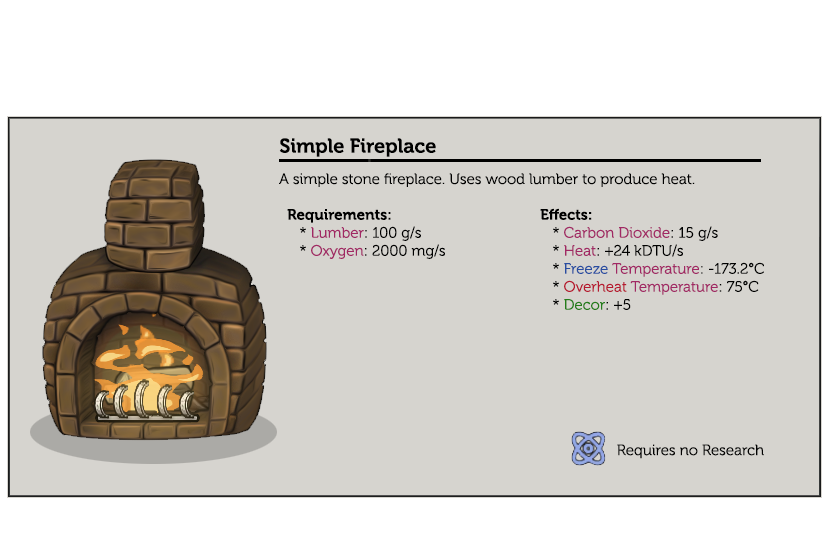
<style>
.page{position:relative;width:830px;height:550px;background:#d6d4cf}
.page>*{position:absolute;margin:0}
.t1{font:20px "Museo-700";color:#000000}
.t2{font:15px "Museo-300";color:#000000}
.t3{font:15px "Museo-700";color:#000000}
.t4{font:15px "Museo-300";color:#a12864}
.t5{font:15px "Museo-300";color:#284da1}
.t6{font:15px "Museo-300";color:#b6182f}
.t7{font:15px "Museo-300";color:#247d1a}
.t8{font:15px "Museo-300";color:#020202}
</style>
<div class="page">
<p class="t1" style="left:279px;top:138px;width:157px;height:19px">Simple Fireplace</p>
<p class="t2" style="left:279px;top:173px;width:416px;height:14px">A simple stone fireplace. Uses wood lumber to produce heat.</p>
<p class="t2" style="left:287px;top:209px;width:158px;height:50px"><span class="t3">Requirements:</span><br>   * <span class="t4">Lumber</span>: 100 g/s                    <br>   * <span class="t4">Oxygen</span>: 2000 mg/s</p>
<p class="t2" style="left:540px;top:208px;width:224px;height:102px"><span class="t3">Effects:</span><br>   * <span class="t4">Carbon Dioxide</span>: 15 g/s                    <br>   * <span class="t4">Heat</span>: +24 kDTU/s<br>   * <span class="t5">Freeze</span><span class="t4"> Temperature</span>: -173.2°C <br>   * <span class="t6">Overheat</span><span class="t4"> Temperature</span>: 75°C<br>   * <span class="t7">Decor</span>: +5</p>
<p class="t8" style="left:617px;top:444px;width:147px;height:15px">Requires no Research</p>
</div>
